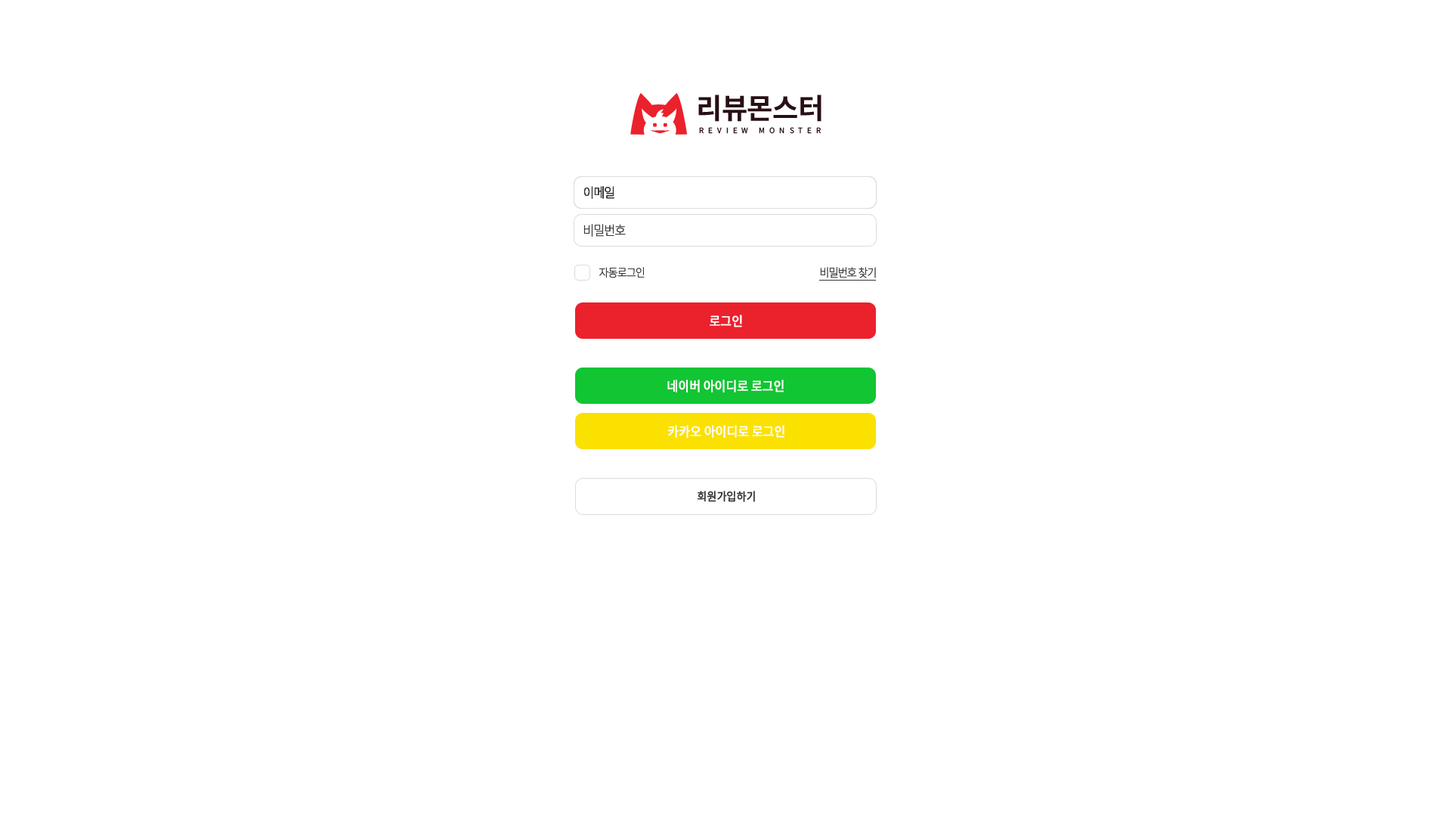
<style>
.page{position:relative;width:1451px;height:822px;background:#ffffff}
.page>*{position:absolute;margin:0}
.t1{font:13.3px "NotoSansKR-Thin";letter-spacing:-0.08em;color:#3a3a3a;font-weight:bold;scale:0.91 1}
.t2{font:11.6px "NotoSansKR-Thin";letter-spacing:-0.08em;color:#3a3a3a;font-weight:bold;scale:0.91 1}
.t3{font:13.3px "NotoSansKR-Regular";letter-spacing:-0.02em;color:#fffefe;font-weight:bold;scale:0.91 1}
.t4{font:11.6px "NotoSansKR-Regular";letter-spacing:-0.02em;color:#333333;font-weight:bold;scale:0.91 1}
</style>
<div class="page">
<p class="t1" style="left:584px;top:186px;width:31px;height:13px">이메일</p>
<p class="t1" style="left:584px;top:186px;width:31px;height:13px">이메일</p>
<p class="t1" style="left:584px;top:224px;width:42px;height:13px">비밀번호</p>
<p class="t2" style="left:599px;top:267px;width:46px;height:11px">자동로그인</p>
<p class="t2" style="left:820px;top:267px;width:56px;height:11px">비밀번호 찾기</p>
<p class="t3" style="left:710px;top:314px;width:32px;height:13px">로그인</p>
<p class="t3" style="left:667px;top:379px;width:117px;height:13px">네이버 아이디로 로그인</p>
<p class="t3" style="left:668px;top:425px;width:117px;height:13px">카카오 아이디로 로그인</p>
<p class="t4" style="left:697px;top:491px;width:58px;height:11px">회원가입하기</p>
</div>
